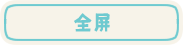
<style>
.page{position:relative;width:183px;height:45px;background:#f7f3e9}
.page>*{position:absolute;margin:0}
.t1{font:12px "shetumodengxiaofangti";color:#6ecad0;font-weight:bold;scale:0.94 1}
</style>
<div class="page">
<p class="t1" style="left:74px;top:13px;width:36px;height:19px">全屏</p>
</div>
